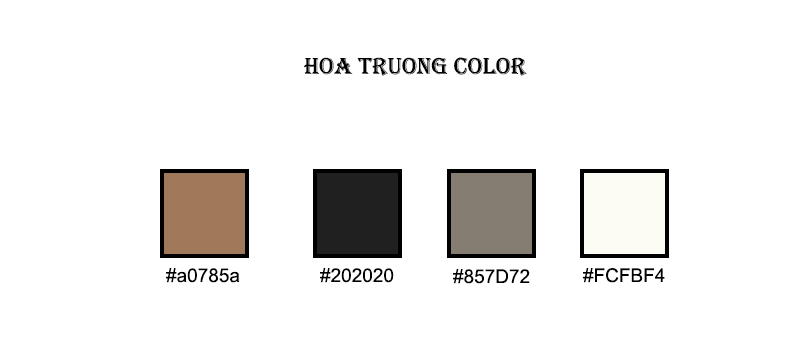
<style>
.page{position:relative;width:800px;height:360px;background:#ffffff}
.page>*{position:absolute;margin:0}
.t1{font:24px "Algerian";color:#000000}
.t2{font:19px "ArialMT";color:#000000}
</style>
<div class="page">
<p class="t1" style="left:304px;top:57px;width:223px;height:19px">Hoa Truong Color</p>
<p class="t2" style="left:166px;top:268px;width:74px;height:15px">#a0785a</p>
<p class="t2" style="left:320px;top:268px;width:74px;height:15px">#202020</p>
<p class="t2" style="left:453px;top:269px;width:77px;height:15px">#857D72</p>
<p class="t2" style="left:583px;top:268px;width:82px;height:15px">#FCFBF4</p>
</div>
